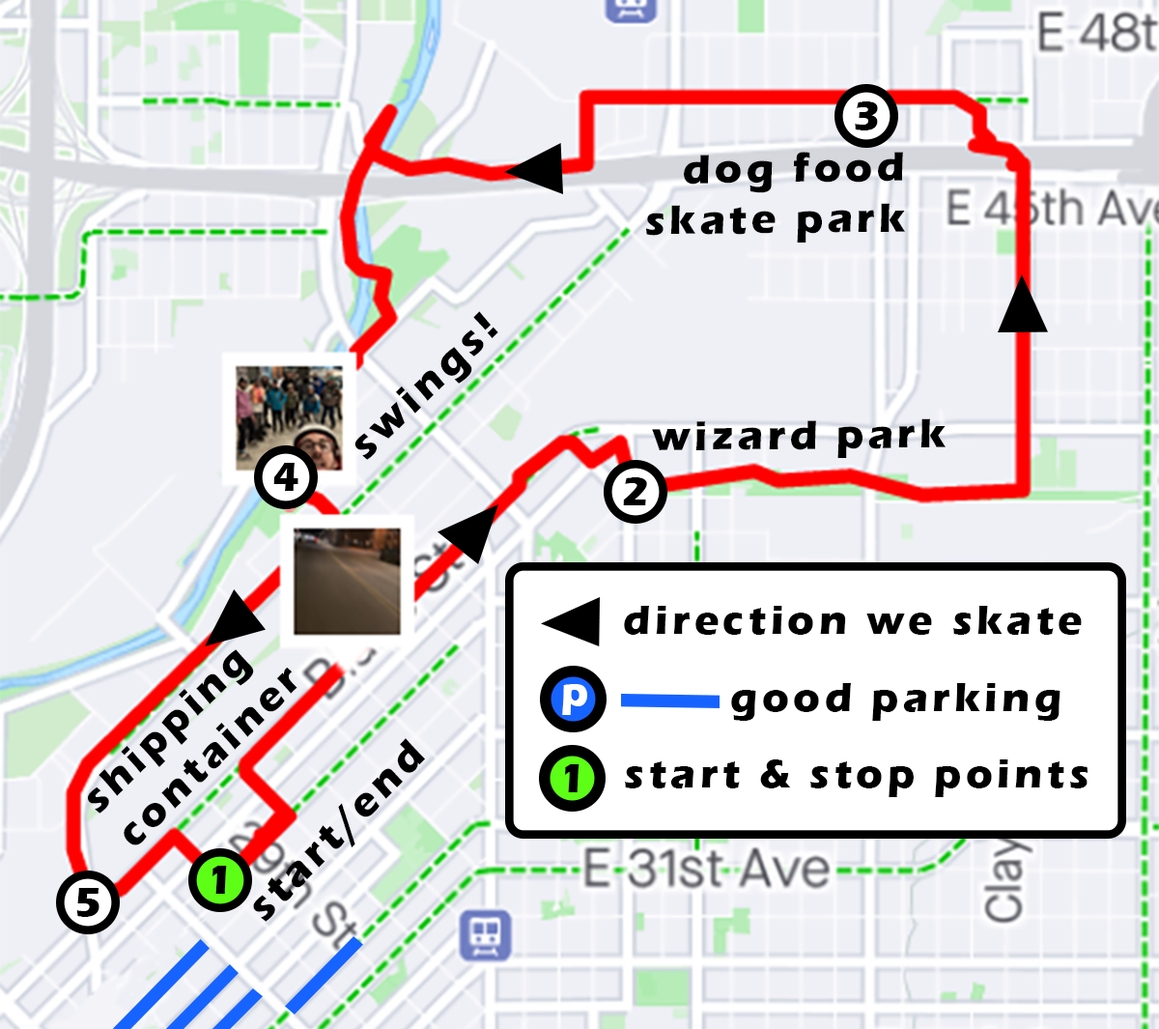
<style>
.page{position:relative;width:1159px;height:1029px;background:#efeff6}
.page>*{position:absolute;margin:0}
.t1{font:41.8px "ErasITC-Bold";letter-spacing:0.1em;color:#000000}
.t2{font:42.2px "ErasITC-Bold";letter-spacing:0.1em;color:#000000}
.t3{font:41.6px "ErasITC-Bold";letter-spacing:0.1em;color:#000000}
.t4{font:41.8px "ErasITC-Bold";letter-spacing:0.1em;color:#ffffff}
</style>
<div class="page">
<p class="t1" style="left:855px;top:101px;width:23px;height:29px">3</p>
<p class="t2" style="left:646px;top:152px;width:259px;height:90px;text-align:right;rotate:-1deg">dog food<br>skate park</p>
<p class="t2" style="left:355px;top:311px;width:143px;height:149px;rotate:-44deg">swings!</p>
<p class="t2" style="left:652px;top:418px;width:294px;height:40px;rotate:-1deg">wizard park</p>
<p class="t1" style="left:273px;top:463px;width:25px;height:28px">4</p>
<p class="t1" style="left:623px;top:477px;width:24px;height:28px">2</p>
<p class="t1" style="left:624px;top:606px;width:458px;height:29px">direction we skate</p>
<p class="t3" style="left:88px;top:649px;width:210px;height:196px;rotate:-45deg">shipping<br>container</p>
<p class="t4" style="left:562px;top:684px;width:25px;height:31px">p</p>
<p class="t1" style="left:731px;top:683px;width:330px;height:38px">good parking</p>
<p class="t2" style="left:253px;top:738px;width:172px;height:184px;rotate:-46deg">start/end</p>
<p class="t1" style="left:625px;top:759px;width:463px;height:38px">start &amp; stop points</p>
<p class="t1" style="left:565px;top:764px;width:15px;height:28px">1</p>
<p class="t1" style="left:213px;top:865px;width:14px;height:28px">1</p>
<p class="t1" style="left:76px;top:888px;width:23px;height:29px">5</p>
</div>
